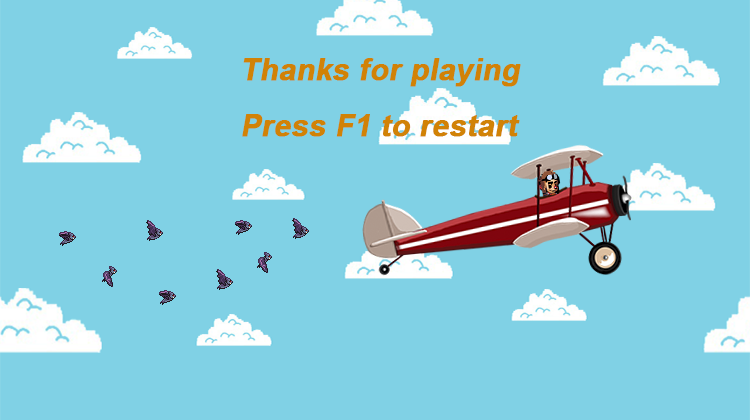
<style>
.page{position:relative;width:750px;height:420px;background:#80d1e5}
.page>*{position:absolute;margin:0}
.t1{font:30px/28px "Arial-BoldMT";color:#d18206;font-weight:bold;font-style:italic}
</style>
<div class="page">
<p class="t1" style="left:242px;top:58px;width:279px;height:79px;text-align:justify">Thanks for playing<br><br>Press F1 to restart</p>
</div>
